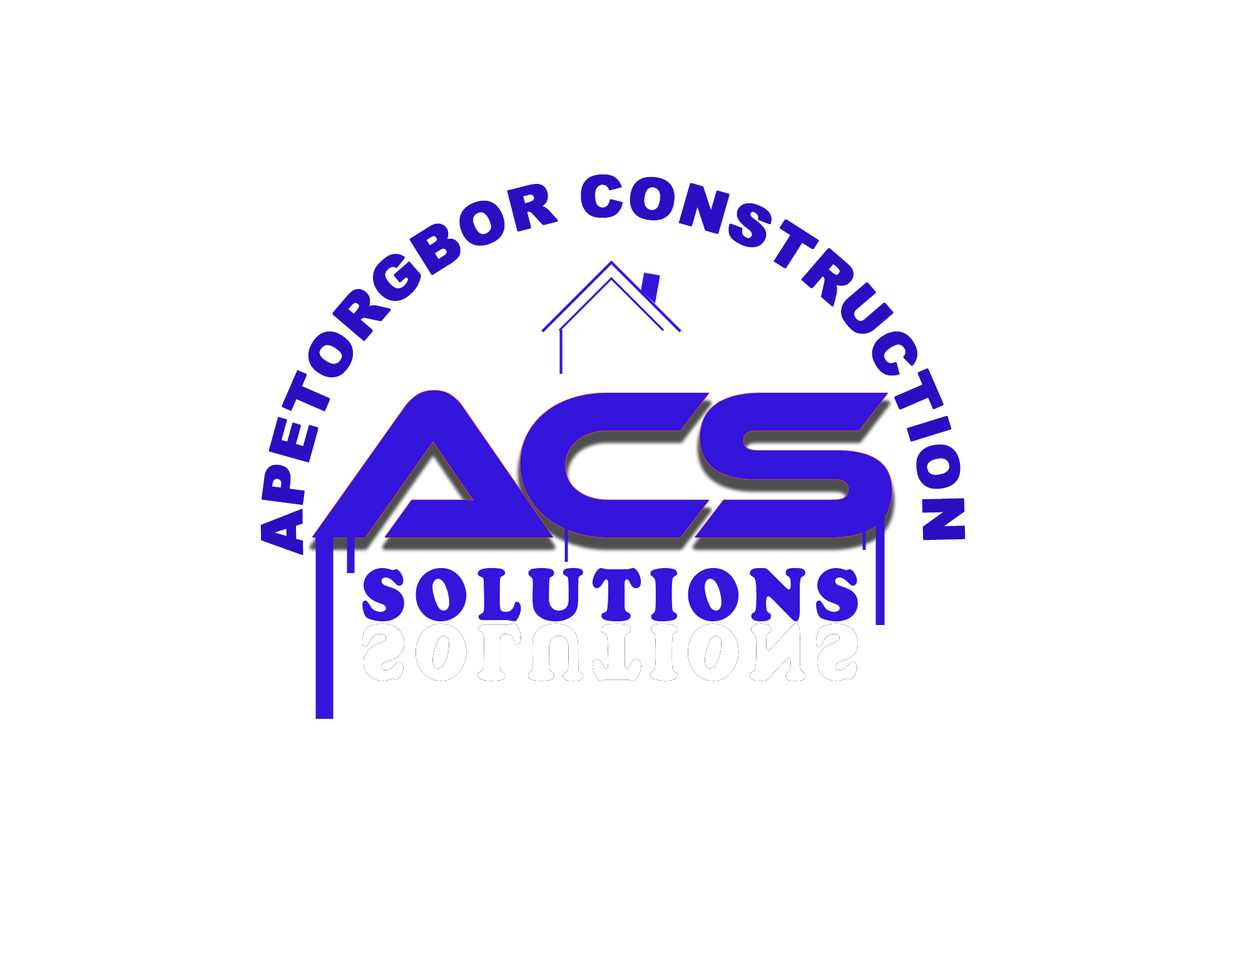
<style>
.page{position:relative;width:1234px;height:966px;background:#ffffff}
.page>*{position:absolute;margin:0}
.t1{font:57.6px "Arial-Black";color:#2a0fc2;font-weight:bold}
.t2{font:216.4px "EthnocentricRg-Regular";letter-spacing:-0.1em;color:#3315db}
.t3{font:76.3px "CooperBlack";letter-spacing:0.1em;color:#3315db;font-weight:bold;scale:0.9 1}
</style>
<div class="page">
<p class="t1" style="left:260px;top:174px;width:706px;height:382px;rotate:-6deg">APETORGBOR CONSTRUCTION</p>
<p class="t2" style="left:312px;top:391px;width:580px;height:147px">ACS</p>
<p class="t3" style="left:362px;top:568px;width:496px;height:54px">SOLUTIONS</p>
</div>
